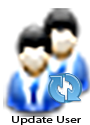
<style>
.page{position:relative;width:90px;height:125px;background:#ffffff}
.page>*{position:absolute;margin:0}
.t1{font:9px "MyriadPro-Regular";color:#000000;scale:1.51 1}
</style>
<div class="page">
<p class="t1" style="left:12px;top:116px;width:69px;height:9px">Update User</p>
</div>
